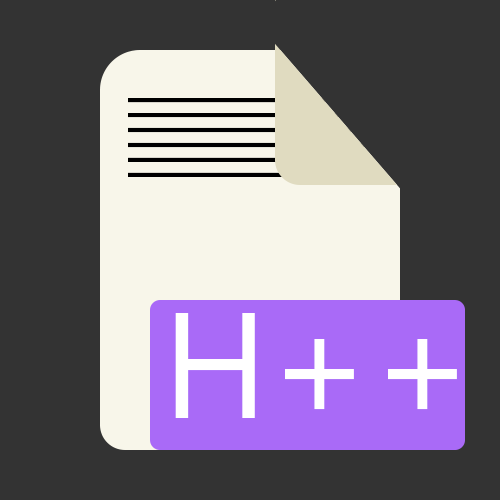
<style>
.page{position:relative;width:500px;height:500px;background:#333333}
.page>*{position:absolute;margin:0}
.t1{font:150px "MicrosoftTaiLe";color:#ffffff}
</style>
<div class="page">
<p class="t1" style="left:175px;top:313px;width:282px;height:105px">H++</p>
</div>
